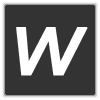
<style>
.page{position:relative;width:100px;height:100px;background:#333333}
.page>*{position:absolute;margin:0}
.t1{font:100px "AvenirNext-Italic";color:#ffffff;font-weight:bold}
</style>
<div class="page">
<p class="t1" style="left:16px;top:27px;width:72px;height:49px">w</p>
</div>
